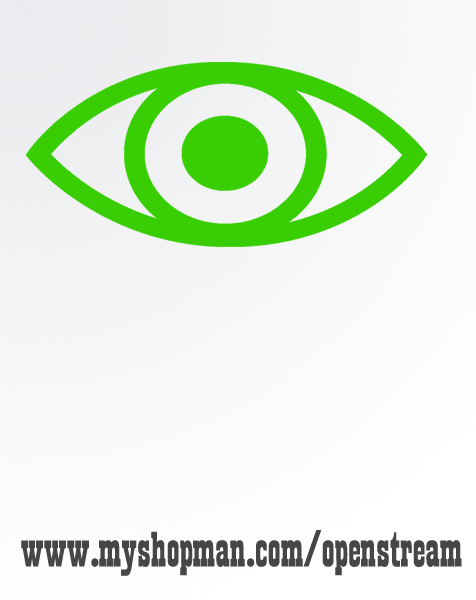
<style>
.page{position:relative;width:476px;height:600px}
.page>*{position:absolute;margin:0}
.t1{font:69.1px "TS-Country-E-NP-Bold";color:#464648;scale:1.15 1}
</style>
<div class="page">
<p class="t1" style="left:21px;top:530px;width:441px;height:46px">www.myshopman.com/openstream</p>
</div>
